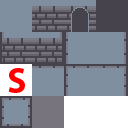
<style>
.page{position:relative;width:128px;height:128px;background:#7f8fa0}
.page>*{position:absolute;margin:0}
.t1{font:36px "MyriadPro-Bold";color:#ff0000}
</style>
<div class="page">
<p class="t1" style="left:8px;top:68px;width:17px;height:25px">S</p>
</div>
